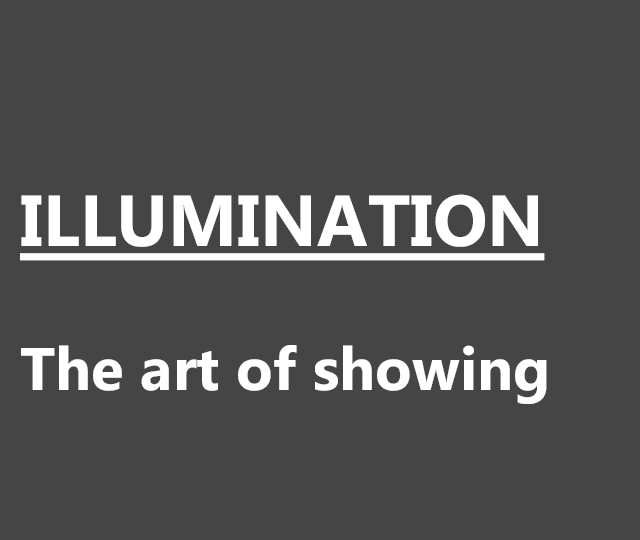
<style>
.page{position:relative;width:640px;height:540px;background:#454545}
.page>*{position:absolute;margin:0}
.t1{font:60px "MicrosoftPhagsPa-Bold";color:#ffffff}
.t2{font:72px "MicrosoftPhagsPa-Bold";color:#ffffff;text-decoration:underline}
</style>
<div class="page">
<p class="t1" style="left:20px;top:194px;width:527px;height:210px"><span class="t2"><br><br>ILLUMINATION<br></span><br>The art of showing</p>
</div>
